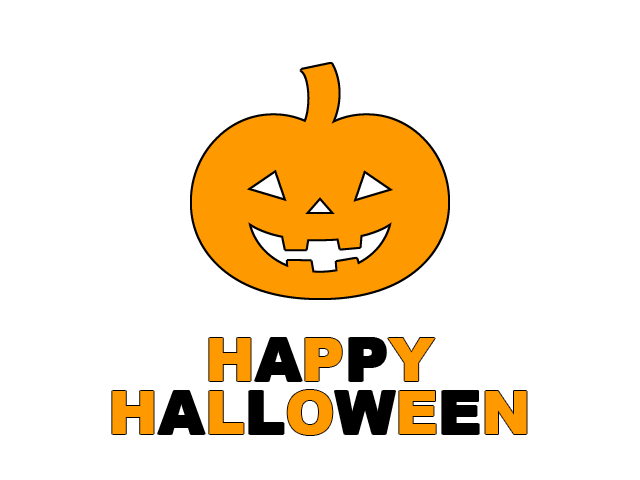
<style>
.page{position:relative;width:640px;height:480px;background:#ffffff}
.page>*{position:absolute;margin:0}
.t1{font:60px/52.9px "Arial-Black";color:#ff9900}
.t2{font:60px/52.9px "Arial-Black";color:#000000}
</style>
<div class="page">
<p class="t1" style="left:112px;top:338px;width:415px;height:97px;text-align:center">H<span class="t2">A</span>P<span class="t2">P</span>Y<br>H<span class="t2">A</span>L<span class="t2">L</span>O<span class="t2">W</span>E<span class="t2">E</span>N</p>
</div>
